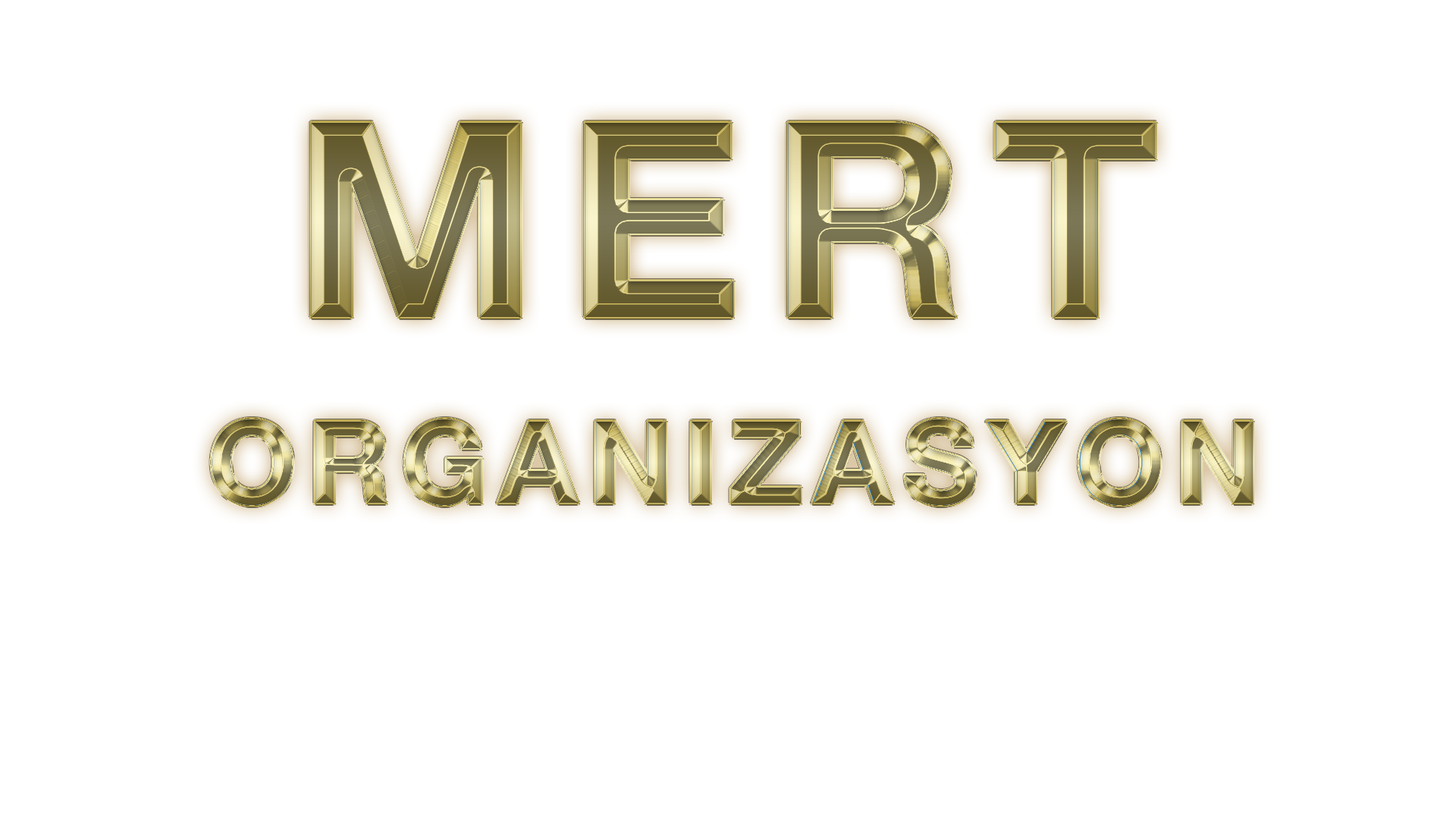
<style>
.page{position:relative;width:1456px;height:819px;background:#ffffff}
.page>*{position:absolute;margin:0}
.t1{font:271.7px "HelveticaNeueLTPro-Bd";letter-spacing:0.1em;text-transform:uppercase}
.t2{font:113.7px "HelveticaNeueLTPro-Bd";letter-spacing:0.1em;text-transform:uppercase}
</style>
<div class="page">
<p class="t1" style="left:311px;top:123px;width:845px;height:194px">Mert</p>
<p class="t1" style="left:311px;top:123px;width:845px;height:194px">Mert</p>
<p class="t2" style="left:212px;top:419px;width:1040px;height:86px">Organizasyon</p>
<p class="t2" style="left:212px;top:419px;width:1040px;height:86px">organızasyon</p>
</div>
